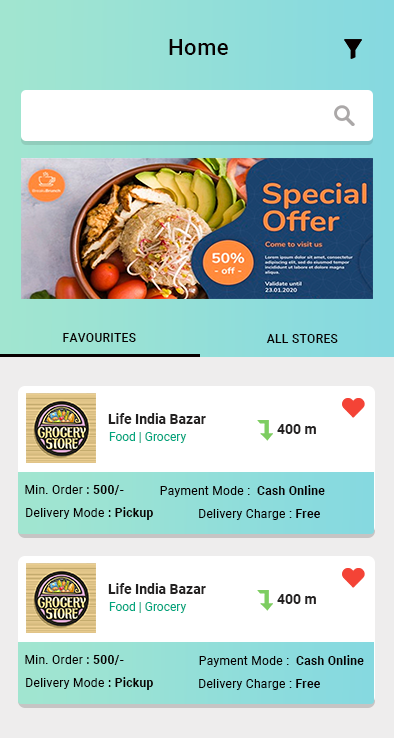
<style>
.page{position:relative;width:394px;height:738px;background:#ffffff}
.page>*{position:absolute;margin:0}
.t1{font:22px "Roboto-Medium";letter-spacing:0.025em;color:#070000}
.t2{font:12px "Roboto-Medium";letter-spacing:0.025em;color:#070000;text-transform:uppercase}
.t3{font:14px "Roboto-Bold";color:#232121}
.t4{font:12px "Roboto-Regular";color:#00a57d}
.t5{font:12px "Roboto-Regular";letter-spacing:0.025em;color:#070000}
.t6{font:12px "Roboto-Medium";letter-spacing:0.025em;color:#070000}
.t7{font:12px "Roboto-Bold";letter-spacing:0.025em;color:#070000}
</style>
<div class="page">
<p class="t1" style="left:169px;top:39px;width:59px;height:16px">Home</p>
<p class="t2" style="left:63px;top:333px;width:73px;height:9px">Favourites</p>
<p class="t2" style="left:266px;top:334px;width:72px;height:9px">All Stores</p>
<p class="t3" style="left:108px;top:413px;width:98px;height:11px">Life India Bazar</p>
<p class="t3" style="left:277px;top:424px;width:39px;height:10px">400 m</p>
<p class="t4" style="left:109px;top:432px;width:78px;height:11px">Food | Grocery</p>
<p class="t5" style="left:25px;top:485px;width:99px;height:10px">Min. Order<span class="t6"> : </span><span class="t7">500/-</span></p>
<p class="t5" style="left:160px;top:485px;width:165px;height:12px">Payment Mode :  <span class="t7">Cash Online</span></p>
<p class="t5" style="left:26px;top:507px;width:127px;height:13px">Delivery Mode<span class="t6"> : </span><span class="t7">Pickup</span></p>
<p class="t5" style="left:199px;top:509px;width:121px;height:11px">Delivery Charge : <span class="t7">Free</span></p>
<p class="t3" style="left:108px;top:583px;width:98px;height:11px">Life India Bazar</p>
<p class="t4" style="left:109px;top:602px;width:78px;height:11px">Food | Grocery</p>
<p class="t3" style="left:277px;top:594px;width:39px;height:10px">400 m</p>
<p class="t5" style="left:25px;top:655px;width:99px;height:10px">Min. Order<span class="t6"> : </span><span class="t7">500/-</span></p>
<p class="t5" style="left:199px;top:655px;width:165px;height:12px">Payment Mode :  <span class="t7">Cash Online</span></p>
<p class="t5" style="left:26px;top:677px;width:127px;height:13px">Delivery Mode<span class="t6"> : </span><span class="t7">Pickup</span></p>
<p class="t5" style="left:199px;top:679px;width:121px;height:11px">Delivery Charge : <span class="t7">Free</span></p>
</div>
